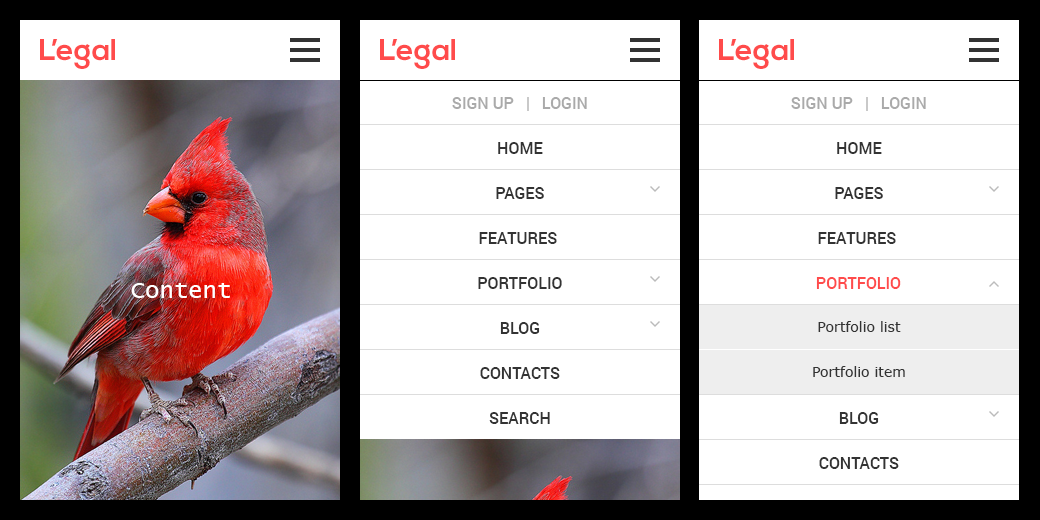
<style>
.page{position:relative;width:1040px;height:520px;background:#ffffff}
.page>*{position:absolute;margin:0}
.t1{font:30px "NexaBold";color:#ff4b4b}
.t2{font:16px/45px "Roboto-Medium";color:#333333;text-transform:uppercase}
.t3{font:16px/45px "Roboto-Medium";color:#aaaaaa;text-transform:uppercase}
.t4{font:16px "Roboto-Medium";color:#ff4b4b;text-transform:uppercase}
.t5{font:24px "LucidaConsole";color:#ffffff}
.t6{font:14px/45px "Verdana";color:#333333}
</style>
<div class="page">
<p class="t1" style="left:40px;top:39px;width:75px;height:30px">L’egal</p>
<p class="t1" style="left:380px;top:39px;width:75px;height:30px">L’egal</p>
<p class="t1" style="left:719px;top:39px;width:75px;height:30px">L’egal</p>
<p class="t2" style="left:452px;top:97px;width:135px;height:327px;text-align:center"><span class="t3">Sign up   |   Login<br></span>Home<br>Pages<br>Features <br>Portfolio<br>Blog<br>Contacts<br>Search</p>
<p class="t2" style="left:791px;top:97px;width:135px;height:372px;text-align:center"><span class="t3">Sign up   |   Login<br></span>Home<br>Pages<br>Features <br>Portfolio<br><br><br>Blog<br>Contacts</p>
<p class="t4" style="left:816px;top:277px;width:85px;height:12px">Portfolio</p>
<p class="t5" style="left:131px;top:283px;width:99px;height:15px">Content</p>
<p class="t6" style="left:813px;top:321px;width:92px;height:56px;text-align:center">Portfolio list<br>Portfolio item</p>
</div>
